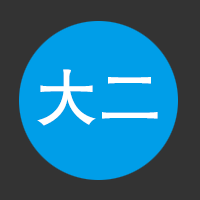
<style>
.page{position:relative;width:200px;height:200px;background:#333333}
.page>*{position:absolute;margin:0}
.t1{font:62.7px "FZHTJW--GB1-0";color:#ffffff}
</style>
<div class="page">
<p class="t1" style="left:37px;top:69px;width:121px;height:57px">大二</p>
</div>
